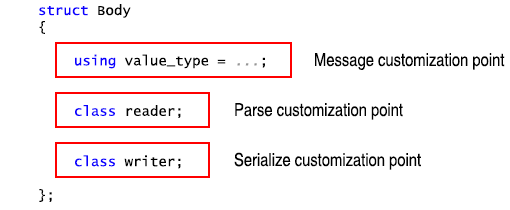
<style>
.page{position:relative;width:510px;height:210px;background:#ffffff}
.page>*{position:absolute;margin:0}
.t1{font:14px "LucidaConsole";color:#000000}
.t2{font:14px "LucidaConsole";color:#0c00ff}
.t3{font:14px "LucidaConsole";color:#959595;font-style:italic}
.t4{font:18px "Helvetica-Narrow";color:#000000}
</style>
<div class="page">
<p class="t1" style="left:39px;top:4px;width:226px;height:198px"><span class="t2">struct </span>Body<br>{<br> <br><span class="t2"> using</span> value_type = <span class="t3">...</span>;<br><br><br><span class="t2"> class </span>reader;<br><br><br> <span class="t2">class</span> writer;<br><br>};</p>
<p class="t4" style="left:315px;top:53px;width:190px;height:17px">Message customization point</p>
<p class="t4" style="left:235px;top:103px;width:168px;height:17px">Parse customization point</p>
<p class="t4" style="left:234px;top:152px;width:187px;height:18px">Serialize customization point</p>
</div>
